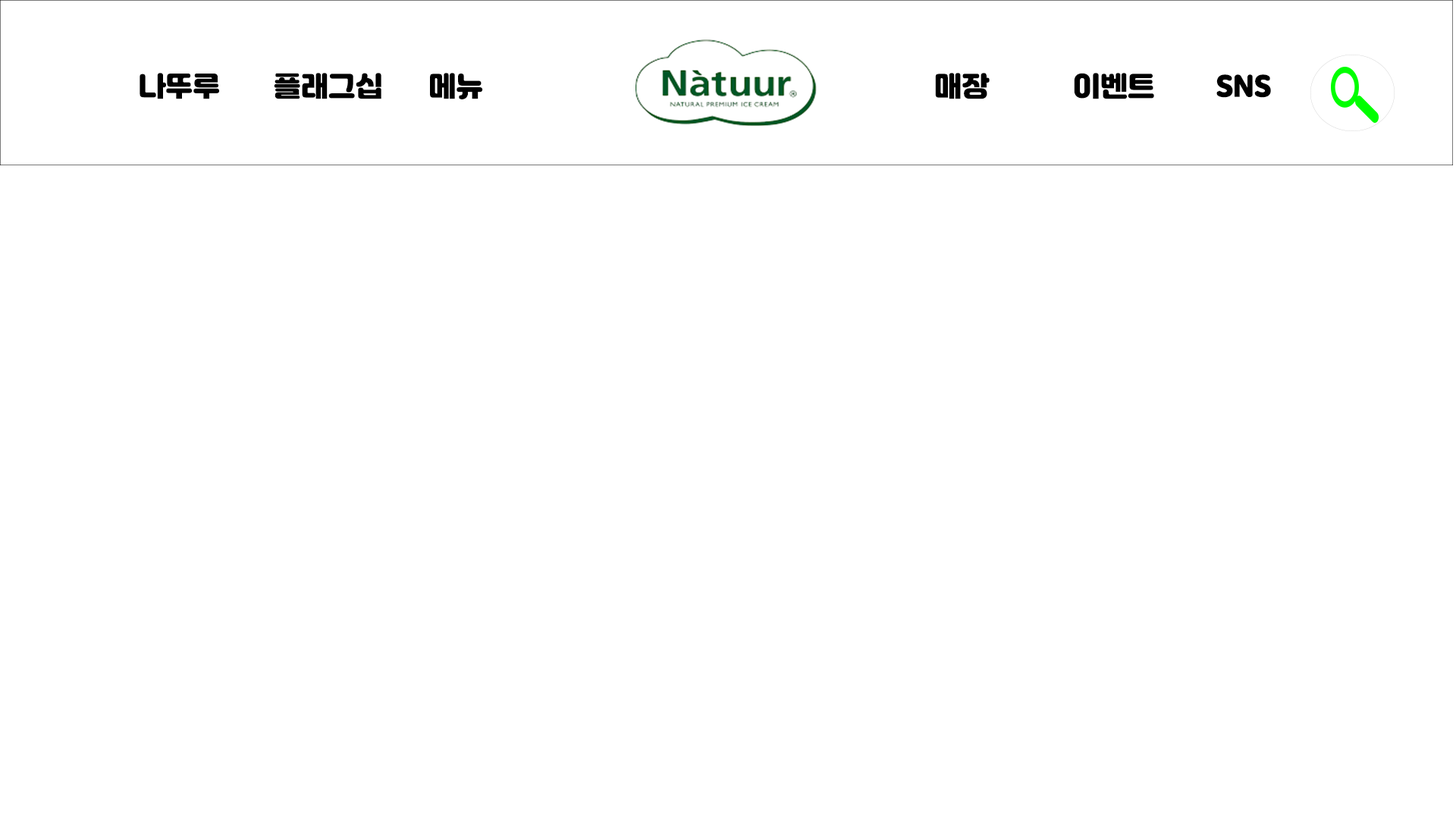
<style>
.page{position:relative;width:1456px;height:819px;background:#ffffff}
.page>*{position:absolute;margin:0}
.t1{font:27.3px "JalnanOTF";color:#000000}
</style>
<div class="page">
<p class="t1" style="left:140px;top:73px;width:1131px;height:26px">나뚜루       플래그십      메뉴                                                           매장           이벤트        SNS</p>
</div>
